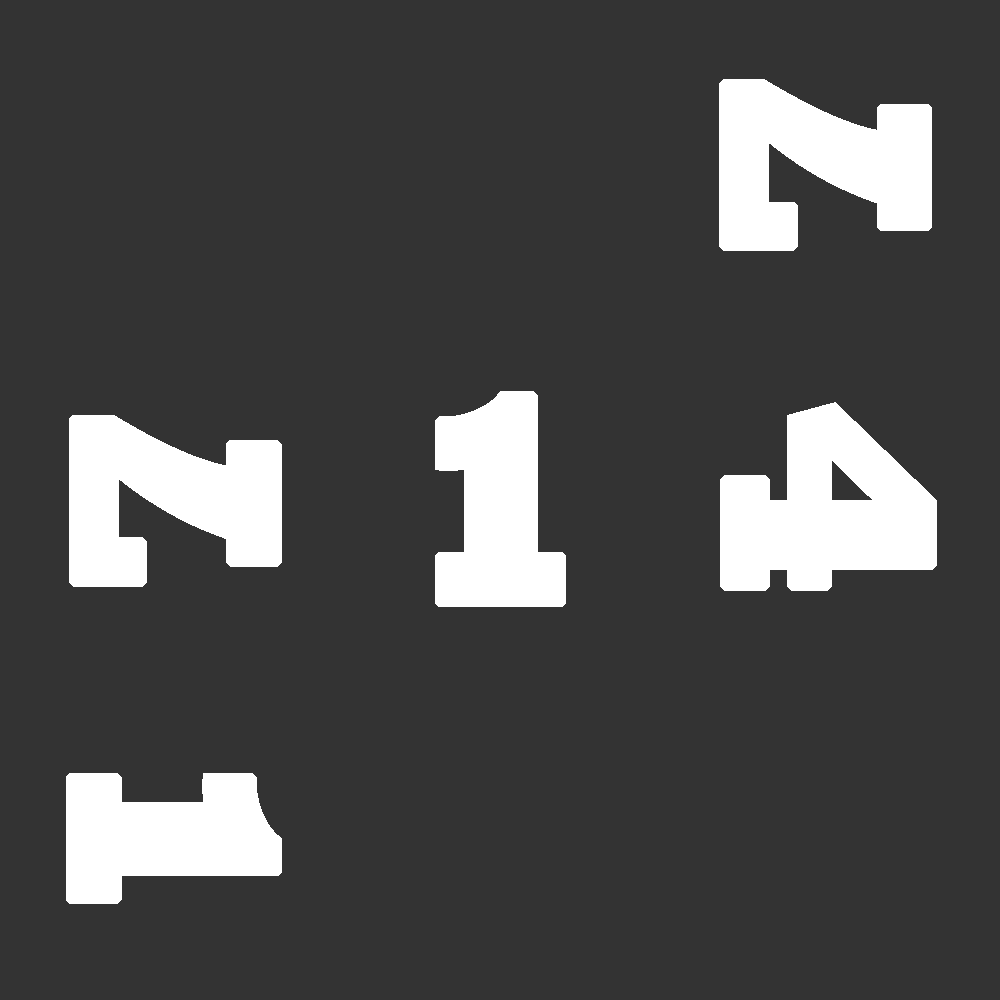
<style>
.page{position:relative;width:1000px;height:1000px;background:#333333}
.page>*{position:absolute;margin:0}
.t1{font:300px "Rockwell-ExtraBold";color:#ffffff;font-weight:bold}
</style>
<div class="page">
<p class="t1" style="left:719px;top:79px;width:213px;height:172px;rotate:-90deg">7</p>
<p class="t1" style="left:435px;top:391px;width:131px;height:216px">1</p>
<p class="t1" style="left:720px;top:402px;width:217px;height:189px;rotate:90deg">4</p>
<p class="t1" style="left:69px;top:415px;width:213px;height:172px;rotate:-90deg">7</p>
<p class="t1" style="left:66px;top:773px;width:216px;height:131px;rotate:90deg">1</p>
</div>
